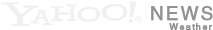
<style>
.page{position:relative;width:213px;height:30px;background:#ffffff}
.page>*{position:absolute;margin:0}
.t1{font:19px "HelveticaLTStd-Roman";letter-spacing:0.08em;color:#919191;font-weight:bold}
.t2{font:9px "HelveticaLTStd-Roman";letter-spacing:0.12em;color:#919191;font-weight:bold}
</style>
<div class="page">
<p class="t1" style="left:151px;top:6px;width:62px;height:15px">NEWS</p>
<p class="t2" style="left:169px;top:23px;width:43px;height:7px">Weather</p>
</div>
